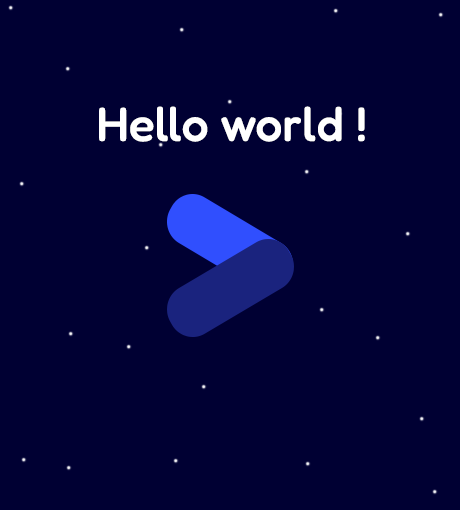
<style>
.page{position:relative;width:460px;height:510px;background:#000033}
.page>*{position:absolute;margin:0}
.t1{font:48px "Fredoka-Medium";color:#ffffff}
</style>
<div class="page">
<p class="t1" style="left:99px;top:106px;width:266px;height:36px">Hello world !</p>
</div>
